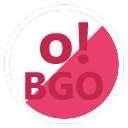
<style>
.page{position:relative;width:128px;height:128px;background:#ffffff}
.page>*{position:absolute;margin:0}
.t1{font:58.3px "SegoeUI-Bold";color:#c32749}
.t2{font:38.9px "SegoeUI-Bold";color:#c32749}
</style>
<div class="page">
<p class="t1" style="left:40px;top:22px;width:49px;height:42px">o!</p>
<p class="t2" style="left:25px;top:71px;width:78px;height:29px">BGO</p>
</div>
